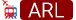
<style>
.page{position:relative;width:76px;height:20px;background:#8e0000}
.page>*{position:absolute;margin:0}
.t1{font:20px "Roboto-Light";letter-spacing:0.01em;color:#ffffff}
</style>
<div class="page">
<p class="t1" style="left:28px;top:2px;width:36px;height:16px">ARL</p>
</div>
